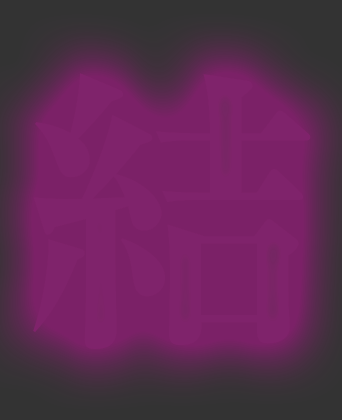
<style>
.page{position:relative;width:342px;height:420px;background:#7b2167}
.page>*{position:absolute;margin:0}
.t1{font:300px "RyuminPr6N-ExBold";color:#7f236b}
</style>
<div class="page">
<p class="t1" style="left:33px;top:73px;width:278px;height:276px">結</p>
</div>
